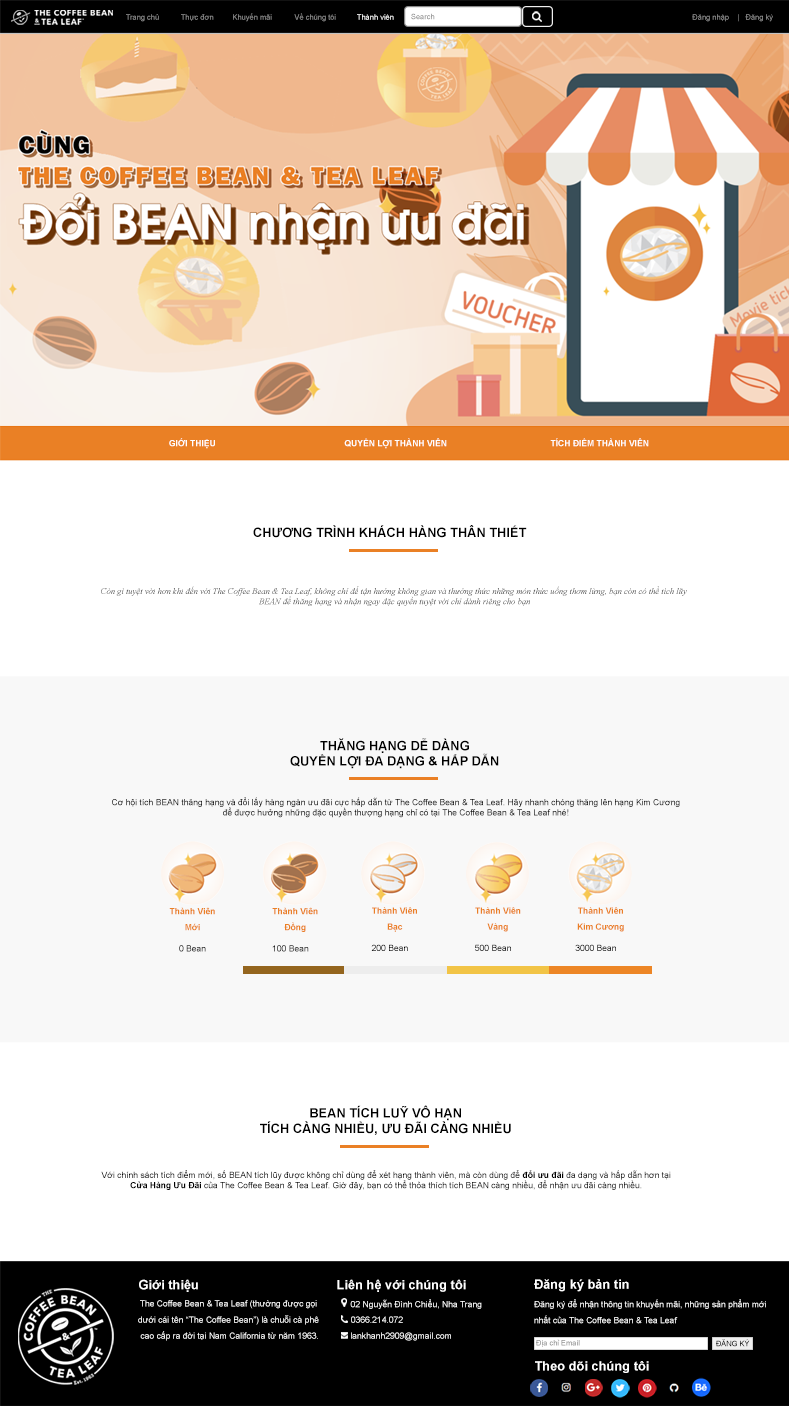
<style>
.page{position:relative;width:789px;height:1406px;background:#ffffff}
.page>*{position:absolute;margin:0}
.t1{font:7.5px "ArialMT";color:#8a8a8a}
.t2{font:7.5px "ArialMT";color:#ffffff}
.t3{font:7.5px "ArialMT"}
.t4{font:8.6px "Arial-BoldMT";color:#ffffff}
.t5{font:12.8px "Arial-BoldMT";color:#000000}
.t6{font:8.6px "TimesNewRomanPS-ItalicMT"}
.t7{font:8.6px "ArialMT";color:#000000}
.t8{font:8.6px/16px "Arial-BoldMT";color:#ea8025}
.t9{font:8.6px "ArialMT"}
.t10{font:8.6px "Arial-BoldMT";color:#000000}
.t11{font:12.8px "Arial-BoldMT";color:#ffffff}
.t12{font:8.6px/16px "ArialMT";color:#ffffff}
.t13{font:8.6px "ArialMT";color:#ffffff}
</style>
<div class="page">
<p class="t1" style="left:126px;top:13px;width:268px;height:9px">Trang chủ         Thực đơn      Khuyến mãi        Về chúng tôi <span class="t2"> Thành viên</span></p>
<p class="t3" style="left:411px;top:13px;width:24px;height:7px">Search</p>
<p class="t1" style="left:692px;top:14px;width:81px;height:8px">Đăng nhập    |   Đăng ký</p>
<p class="t4" style="left:169px;top:438px;width:46px;height:11px">GIỚI THIỆU</p>
<p class="t4" style="left:344px;top:438px;width:103px;height:11px">QUYỀN LỢI THÀNH VIÊN</p>
<p class="t4" style="left:550px;top:438px;width:99px;height:9px">TÍCH ĐIỂM THÀNH VIÊN</p>
<p class="t5" style="left:253px;top:525px;width:274px;height:13px">CHƯƠNG TRÌNH KHÁCH HÀNG THÂN THIẾT</p>
<p class="t6" style="left:101px;top:586px;width:586px;height:20px;text-align:center">Còn gì tuyệt vời hơn khi đến với The Coffee Bean &amp; Tea Leaf, không chỉ để tận hưởng không gian và thưởng thức những món thức uống thơm lừng, bạn còn có thể tích lũy <br>BEAN để thăng hạng và nhận ngay đặc quyền tuyệt vời chỉ dành riêng cho bạn</p>
<p class="t5" style="left:290px;top:738px;width:209px;height:31px;text-align:center">THĂNG HẠNG DỄ DÀNG<br>QUYỀN LỢI ĐA DẠNG &amp; HẤP DẪN</p>
<p class="t7" style="left:112px;top:797px;width:568px;height:21px;text-align:center">Cơ hội tích BEAN thăng hạng và đổi lấy hàng ngàn ưu đãi cực hấp dẫn từ The Coffee Bean &amp; Tea Leaf. Hãy nhanh chóng thăng lên hạng Kim Cương<br>để được hưởng những đặc quyền thượng hạng chỉ có tại The Coffee Bean &amp; Tea Leaf nhé!</p>
<p class="t8" style="left:169px;top:907px;width:46px;height:24px;text-align:center">Thành Viên<br>Mới</p>
<p class="t8" style="left:272px;top:907px;width:46px;height:25px;text-align:center">Thành Viên<br>Đồng</p>
<p class="t8" style="left:372px;top:907px;width:45px;height:25px;text-align:center">Thành Viên<br>Bạc</p>
<p class="t8" style="left:475px;top:907px;width:46px;height:25px;text-align:center">Thành Viên<br>Vàng</p>
<p class="t8" style="left:577px;top:907px;width:47px;height:25px;text-align:center">Thành Viên<br>Kim Cương</p>
<p class="t9" style="left:179px;top:945px;width:27px;height:7px">0 Bean</p>
<p class="t9" style="left:272px;top:945px;width:37px;height:7px">100 Bean</p>
<p class="t7" style="left:371px;top:944px;width:37px;height:7px">200 Bean</p>
<p class="t9" style="left:475px;top:944px;width:36px;height:7px">500 Bean</p>
<p class="t7" style="left:575px;top:944px;width:41px;height:7px">3000 Bean</p>
<p class="t5" style="left:260px;top:1105px;width:251px;height:30px;text-align:center">BEAN TÍCH LUỸ VÔ HẠN<br>TÍCH CÀNG NHIỀU, ƯU ĐÃI CÀNG NHIỀU</p>
<p class="t7" style="left:101px;top:1170px;width:570px;height:20px;text-align:center">Với chính sách tích điểm mới, số BEAN tích lũy được không chỉ dùng để xét hạng thành viên, mà còn dùng để <span class="t10">đổi ưu đãi</span> đa dạng và hấp dẫn hơn tại<br><span class="t10">Cửa Hàng Ưu Đãi</span> của The Coffee Bean &amp; Tea Leaf. Giờ đây, bạn có thể thỏa thích tích BEAN càng nhiều, để nhận ưu đãi càng nhiều.</p>
<p class="t11" style="left:139px;top:1279px;width:59px;height:13px">Giới thiệu</p>
<p class="t11" style="left:337px;top:1279px;width:129px;height:13px">Liên hệ với chúng tôi</p>
<p class="t11" style="left:534px;top:1279px;width:95px;height:13px">Đăng ký bản tin</p>
<p class="t12" style="left:138px;top:1300px;width:181px;height:41px;text-align:center">The Coffee Bean &amp; Tea Leaf (thường được gọi <br>dưới cái tên “The Coffee Bean”) là chuỗi cà phê <br>cao cấp ra đời tại Nam California từ năm 1963.</p>
<p class="t13" style="left:350px;top:1299px;width:132px;height:10px">02 Nguyễn Đình Chiểu, Nha Trang</p>
<p class="t12" style="left:534px;top:1299px;width:232px;height:25px">Đăng ký để nhận thông tin khuyến mãi, những sản phẩm mới <br>nhất của The Coffee Bean &amp; Tea Leaf</p>
<p class="t13" style="left:351px;top:1316px;width:52px;height:7px">0366.214.072</p>
<p class="t13" style="left:351px;top:1332px;width:100px;height:9px">lankhanh2909@gmail.com</p>
<p class="t3" style="left:536px;top:1339px;width:44px;height:8px">Địa chỉ Email</p>
<p class="t3" style="left:716px;top:1339px;width:34px;height:8px">ĐĂNG KÝ</p>
<p class="t11" style="left:535px;top:1361px;width:114px;height:12px">Theo dõi chúng tôi</p>
</div>
